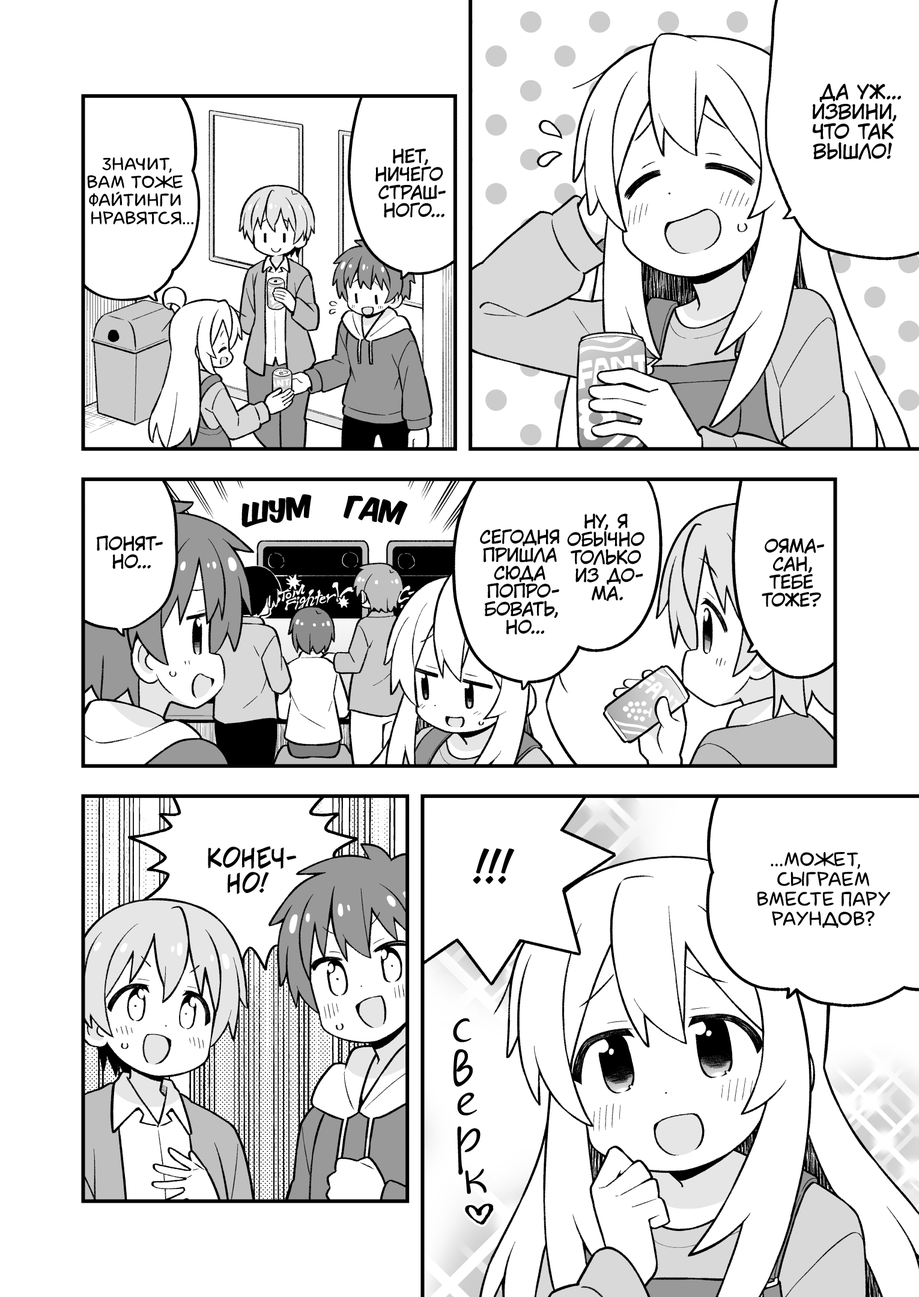
<style>
.page{position:relative;width:919px;height:1297px;background:#ffffff}
.page>*{position:absolute;margin:0}
.t1{font:19.8px "KuraiVoice2";color:#000000;text-transform:uppercase}
.t2{font:18px "KuraiVoice2";color:#000000;text-transform:uppercase}
.t3{font:18px "laCartoonerie";color:#000000;text-transform:uppercase}
.t4{font:27px "KomikaTitle-AxisRUS-LAT";color:#000000;text-transform:uppercase}
.t5{font:25.2px "v_CCJeffCampbell";color:#000000;text-transform:uppercase}
.t6{font:43.2px "v_CCJeffCampbell";color:#000000;text-transform:uppercase}
.t7{font:19.8px "laCartoonerie";color:#000000;text-transform:uppercase}
.t8{font:46.9px "JakobCTT-Regular";color:#000000}
</style>
<div class="page">
<p class="t1" style="left:813px;top:83px;width:88px;height:77px;text-align:center">Да уж...<br>Извини,<br>что так<br>вышло!</p>
<p class="t2" style="left:375px;top:148px;width:71px;height:70px;text-align:center">Нет,<br>ничего<br>страш-<br>ного...</p>
<p class="t3" style="left:87px;top:157px;width:106px;height:68px;text-align:center">Значит,<br>вам тоже<br>файтинги<br>нравятся...</p>
<p class="t4" style="left:241px;top:494px;width:71px;height:34px;rotate:-9deg">шум</p>
<p class="t4" style="left:344px;top:496px;width:64px;height:30px;rotate:7deg">гам</p>
<p class="t2" style="left:567px;top:514px;width:78px;height:87px;text-align:center">Ну, я<br>обычно<br>только<br>из до-<br>ма.</p>
<p class="t2" style="left:480px;top:529px;width:80px;height:106px;text-align:center">Сегодня<br>пришла<br>сюда<br>попро-<br>бовать,<br>но...</p>
<p class="t2" style="left:97px;top:535px;width:66px;height:34px;text-align:center">Понят-<br>но...</p>
<p class="t2" style="left:762px;top:538px;width:62px;height:69px;text-align:center">Ояма-<br>сан,<br>тебе<br>тоже?</p>
<p class="t5" style="left:208px;top:846px;width:89px;height:48px;text-align:center">Конеч-<br>но!</p>
<p class="t6" style="left:473px;top:849px;width:42px;height:35px">!!!</p>
<p class="t7" style="left:757px;top:852px;width:133px;height:77px;text-align:center">...Может,<br>сыграем<br>вместе пару<br>раундов?</p>
<p class="t8" style="left:453px;top:1018px;width:19px;height:25px;rotate:3deg">с</p>
<p class="t8" style="left:453px;top:1049px;width:20px;height:38px;rotate:4deg">в</p>
<p class="t8" style="left:457px;top:1093px;width:20px;height:23px;rotate:2deg">е</p>
<p class="t8" style="left:457px;top:1127px;width:24px;height:49px">р</p>
<p class="t8" style="left:465px;top:1169px;width:22px;height:26px;rotate:-3deg">к</p>
</div>
